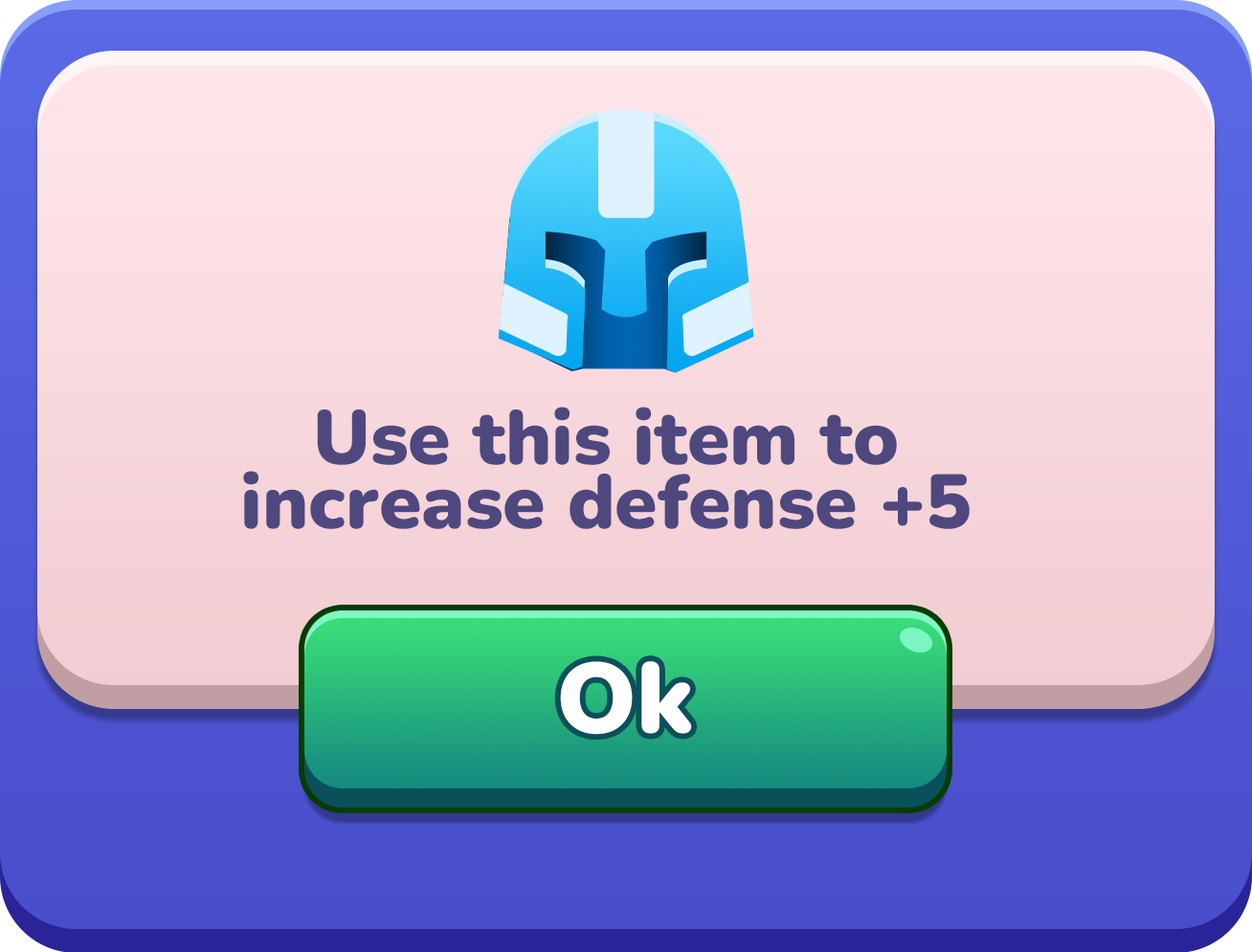
<style>
.page{position:relative;width:1252px;height:952px}
.page>*{position:absolute;margin:0}
.t1{font:76.6px/63.8px "Nunito-Black";color:#4e487f}
.t2{font:99.5px "Nunito-Black";color:#ffffff}
</style>
<div class="page">
<p class="t1" style="left:243px;top:407px;width:727px;height:122px;text-align:center">Use this item to<br>increase defense +5</p>
<p class="t2" style="left:560px;top:661px;width:132px;height:74px">Ok</p>
</div>
